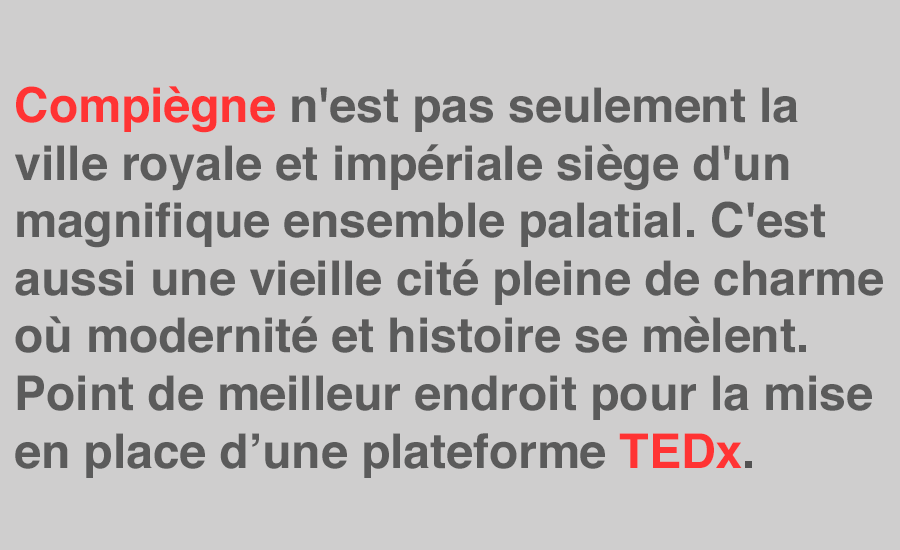
<style>
.page{position:relative;width:900px;height:550px;background:#cfcece}
.page>*{position:absolute;margin:0}
.t1{font:48px "Helvetica-Bold";color:#5b5b5b}
.t2{font:48px "Helvetica-Bold";color:#ff3333}
.t3{font:48px "Helvetica-Bold";color:#525252}
</style>
<div class="page">
<p class="t1" style="left:15px;top:86px;width:868px;height:392px"><span class="t2">Compiègne </span>n'est pas seulement la ville royale et impériale siège d'un <br>magnifique ensemble palatial. C'est aussi une vieille cité pleine de charme où modernité et histoire se mèlent. <br>Point de meilleur endroit pour la mise en place d’une plateforme <span class="t2">TEDx</span><span class="t3">.</span></p>
</div>
